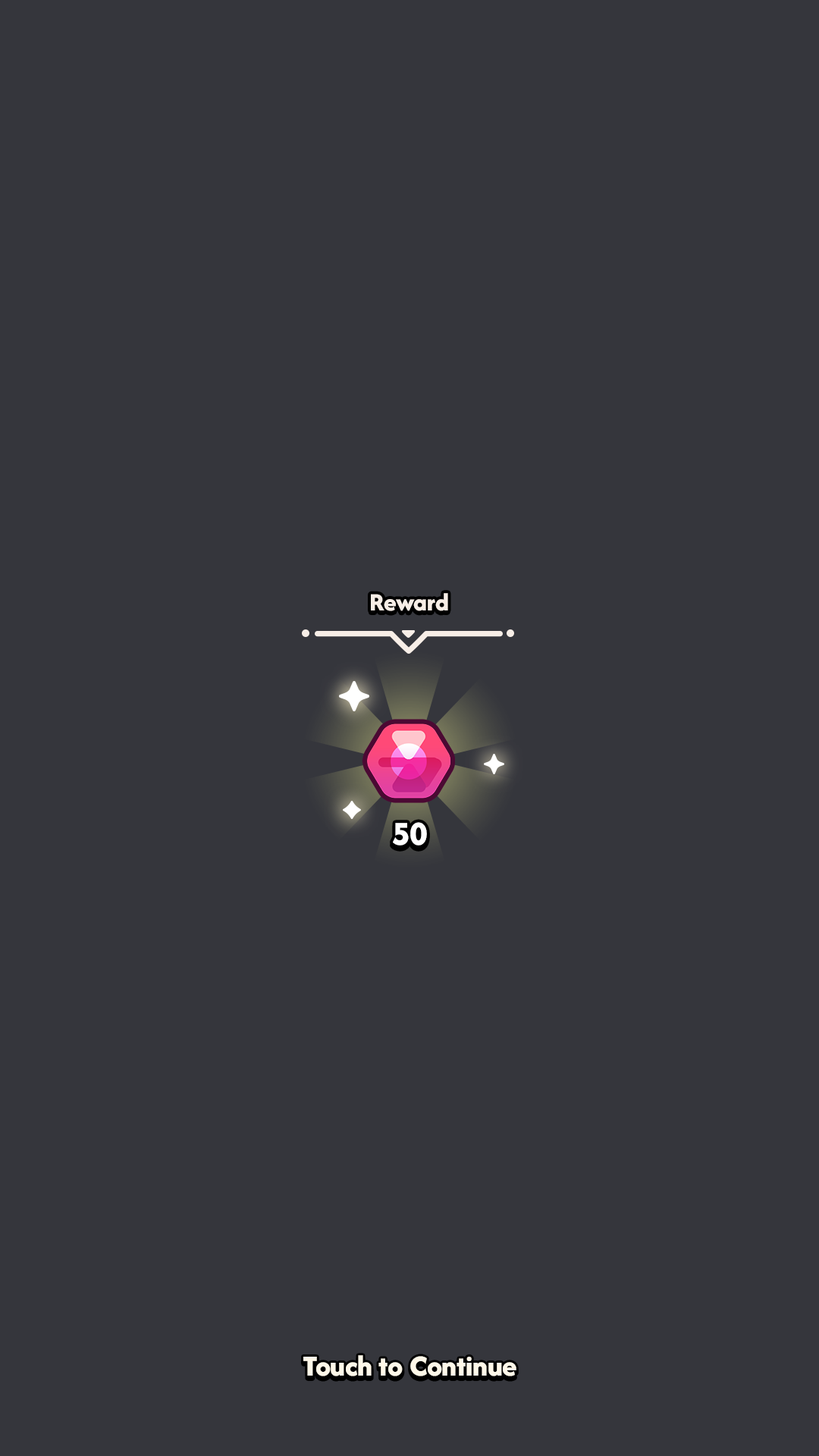
<style>
.page{position:relative;width:819px;height:1456px;background:#35363c}
.page>*{position:absolute;margin:0}
.t1{font:25.8px "AfacadFlux-ExtraBold";color:#f7eee7}
.t2{font:34.9px "AfacadFlux-ExtraBold";color:#ffffff}
.t3{font:30.3px "AfacadFlux-ExtraBold";color:#fff8e9}
</style>
<div class="page">
<p class="t1" style="left:371px;top:593px;width:77px;height:18px">Reward</p>
<p class="t2" style="left:393px;top:822px;width:34px;height:24px">50</p>
<p class="t3" style="left:303px;top:1355px;width:213px;height:21px">Touch to Continue</p>
</div>
